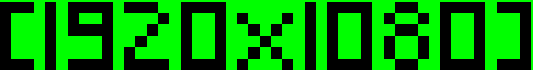
<style>
.page{position:relative;width:533px;height:70px;background:#00ff00}
.page>*{position:absolute;margin:0}
.t1{font:57px "Pixeled";color:#000000}
</style>
<div class="page">
<p class="t1" style="left:0px;top:2px;width:531px;height:68px">[1920x1080]</p>
</div>
